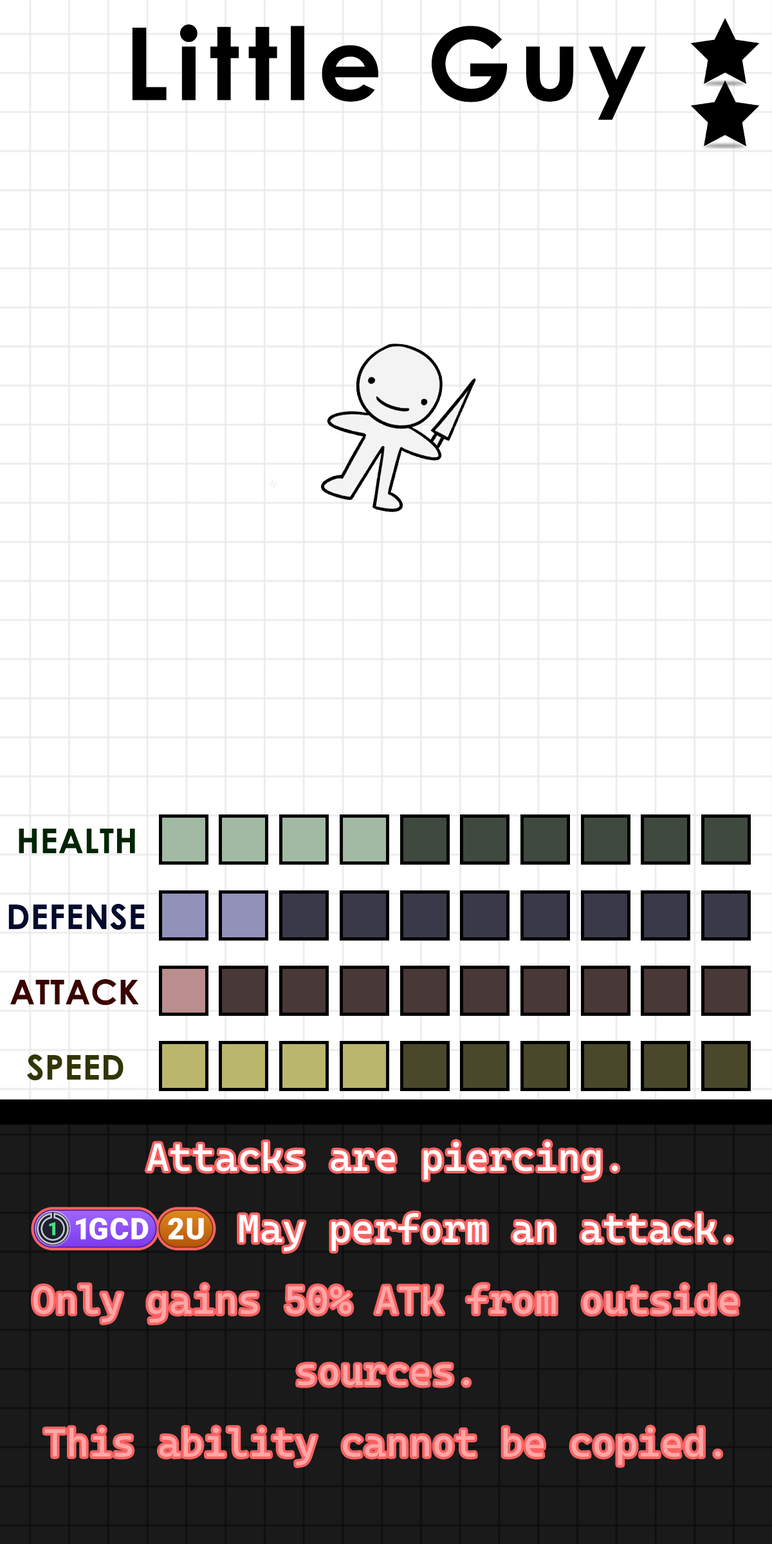
<style>
.page{position:relative;width:772px;height:1544px;background:#ffffff}
.page>*{position:absolute;margin:0}
.t1{font:173px "CenturyGothic-Bold";letter-spacing:0.08em;color:#000000}
.t2{font:58.6px "CenturyGothic-Bold";letter-spacing:0.015em;color:#002502}
.t3{font:58.6px "CenturyGothic-Bold";letter-spacing:0.015em;color:#040a2e}
.t4{font:58.6px "CenturyGothic-Bold";letter-spacing:0.015em;color:#3a0300}
.t5{font:58.6px "CenturyGothic-Bold";letter-spacing:0.015em;color:#323600}
.t6{font:66.9px/71.4px "CascadiaCode-Regular";color:#ffa6a6}
.t7{font:66.9px/71.4px "CascadiaCode-Regular";color:#ffffff}
.t8{font:66.9px/71.4px "stoogedings-Regular";color:#ffffff}
</style>
<div class="page">
<p class="t1" style="left:132px;top:24px;width:514px;height:96px">Little Guy</p>
<p class="t2" style="left:19px;top:829px;width:116px;height:25px">HEALTH</p>
<p class="t3" style="left:8px;top:904px;width:137px;height:26px">DEFENSE</p>
<p class="t4" style="left:10px;top:979px;width:129px;height:27px">ATTACK</p>
<p class="t5" style="left:27px;top:1055px;width:97px;height:26px">SPEED</p>
<p class="t6" style="left:33px;top:1141px;width:705px;height:325px;text-align:center"><span class="t7">Attacks are piercing.<br></span><span class="t8">(1GCD)(2U)</span><span class="t7"> May perform an attack.<br></span>Only gains 50% ATK from outside sources.<br>This ability cannot be copied.</p>
</div>
